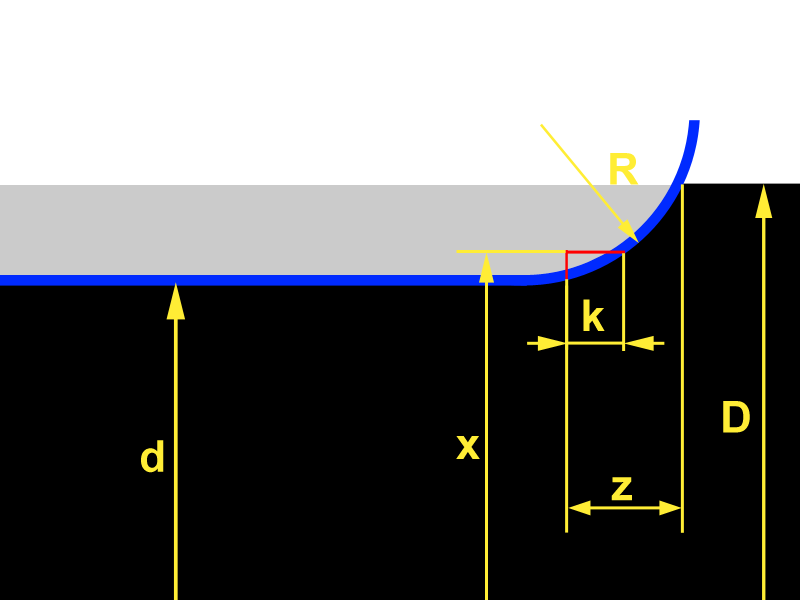
<style>
.page{position:relative;width:800px;height:600px;background:#000000}
.page>*{position:absolute;margin:0}
.t1{font:44px "Arial-BoldMT";color:#ffee35}
</style>
<div class="page">
<p class="t1" style="left:610px;top:153px;width:29px;height:32px">R</p>
<p class="t1" style="left:583px;top:299px;width:22px;height:32px">k</p>
<p class="t1" style="left:723px;top:401px;width:27px;height:32px">D</p>
<p class="t1" style="left:456px;top:436px;width:24px;height:23px">x</p>
<p class="t1" style="left:141px;top:440px;width:23px;height:33px">d</p>
<p class="t1" style="left:611px;top:477px;width:21px;height:24px">z</p>
</div>
